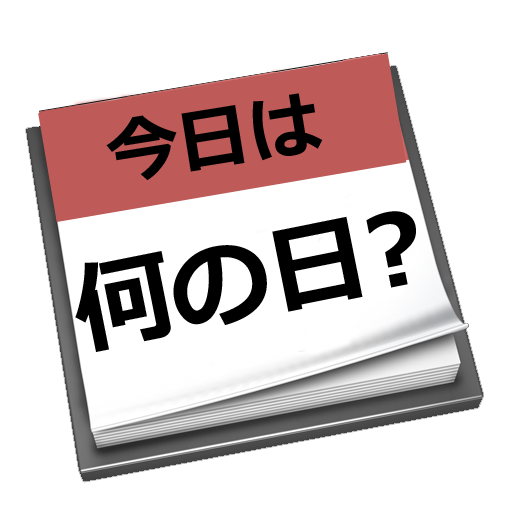
<style>
.page{position:relative;width:512px;height:512px;background:#ffffff}
.page>*{position:absolute;margin:0}
.t1{font:71.7px "Meiryo-Bold";color:#000000}
.t2{font:99.6px "Meiryo-Bold";color:#000000}
</style>
<div class="page">
<p class="t1" style="left:106px;top:93px;width:217px;height:87px;rotate:-9deg">今日は</p>
<p class="t2" style="left:75px;top:211px;width:341px;height:141px;rotate:-11deg">何の日?</p>
</div>
